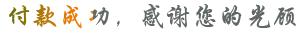
<style>
.page{position:relative;width:300px;height:30px;background:#ffffff}
.page>*{position:absolute;margin:0}
.t1{font:26.7px "STXingkai";color:#616863}
</style>
<div class="page">
<p class="t1" style="left:9px;top:4px;width:287px;height:25px">付款成功，感谢您的光顾</p>
</div>
